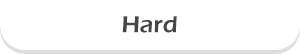
<style>
.page{position:relative;width:300px;height:54px;background:#ffffff}
.page>*{position:absolute;margin:0}
.t1{font:24px "ErasITC-Demi";color:#464646}
</style>
<div class="page">
<p class="t1" style="left:122px;top:16px;width:55px;height:17px">Hard</p>
</div>
